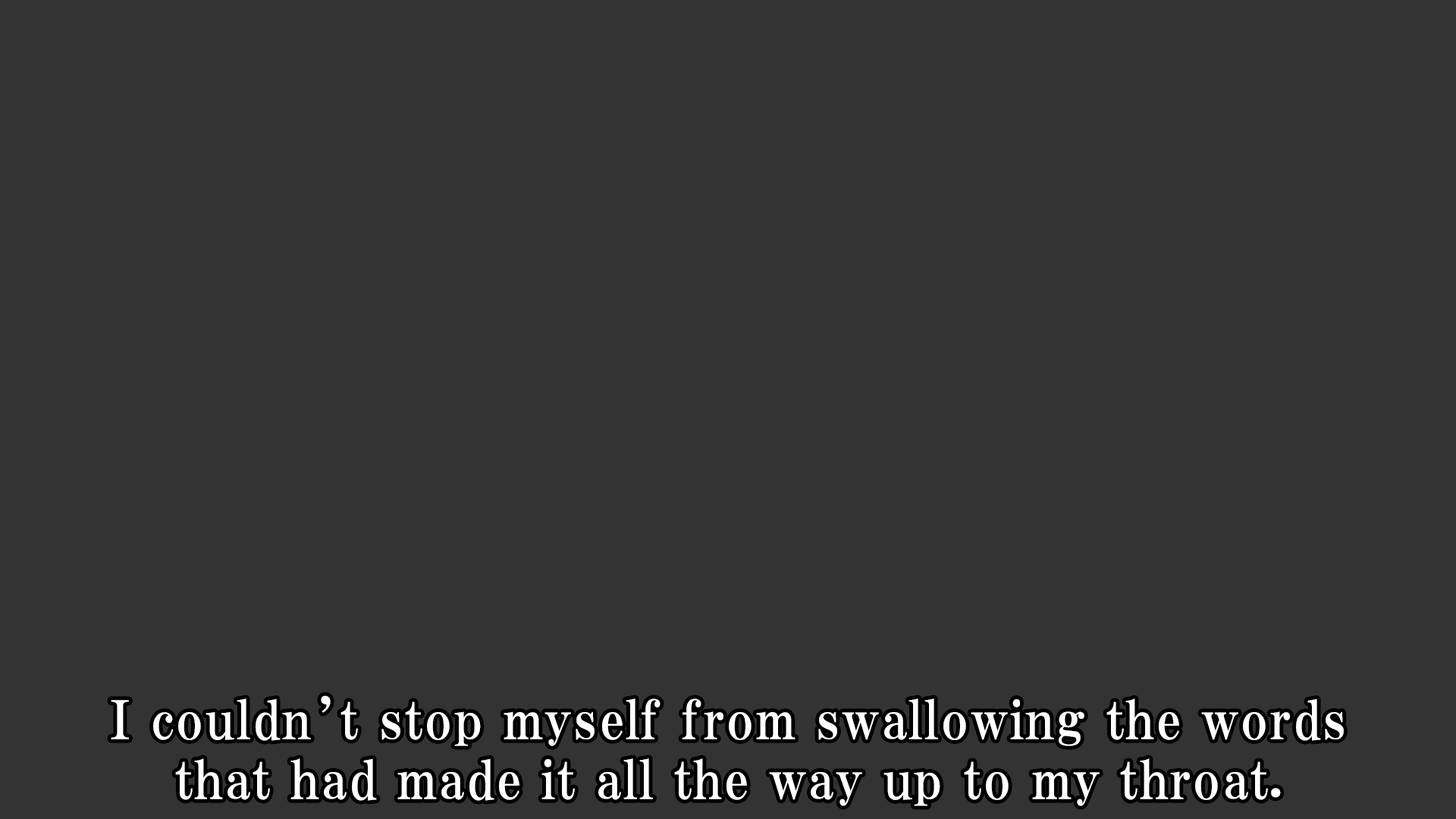
<style>
.page{position:relative;width:1456px;height:819px;background:#333333}
.page>*{position:absolute;margin:0}
.t1{font:53.1px/59.9px "HGPMinchoE";letter-spacing:0.025em;color:#ffffff}
</style>
<div class="page">
<p class="t1" style="left:111px;top:695px;width:1233px;height:111px;text-align:center">I couldn’t stop myself from swallowing the words<br>that had made it all the way up to my throat.</p>
</div>
